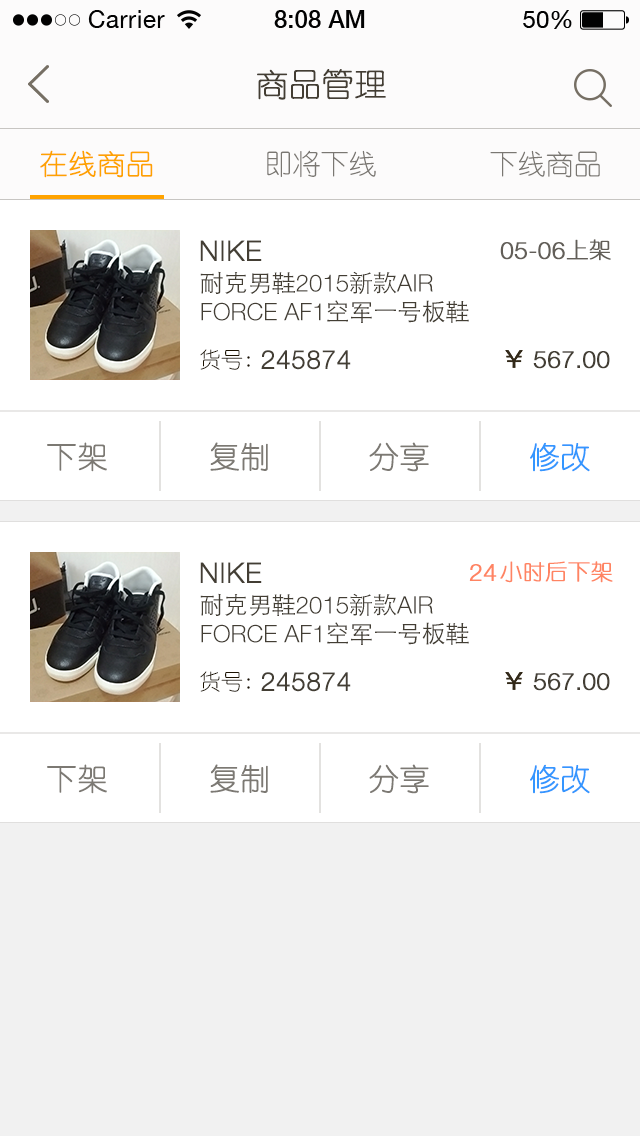
<style>
.page{position:relative;width:640px;height:1136px;background:#ffffff}
.page>*{position:absolute;margin:0}
.t1{font:32px "YouYuan";color:#433d33;text-transform:uppercase;font-weight:bold}
.t2{font:28px "YouYuan";color:#fea200;text-transform:uppercase;font-weight:bold}
.t3{font:28px "YouYuan";color:#7a7772;text-transform:uppercase}
.t4{font:28px "HelveticaNeueLTPro-Lt";color:#433e34;text-transform:uppercase;font-weight:bold}
.t5{font:24px "HelveticaNeueLTPro-Lt";color:#625e58;text-transform:uppercase;font-weight:bold}
.t6{font:22px "YouYuan";color:#625e58;text-transform:uppercase;font-weight:bold}
.t7{font:24px "HelveticaNeueLTPro-Lt";color:#433e34;text-transform:uppercase}
.t8{font:24px "STHeitiSC-Light";color:#433e34;text-transform:uppercase}
.t9{font:22px "YouYuan";color:#1b1100;text-transform:uppercase}
.t10{font:26px "HelveticaNeueLTPro-Lt";color:#433e34;text-transform:uppercase;font-weight:bold}
.t11{font:24px "HelveticaNeueLTPro-Lt";color:#433e34;text-transform:uppercase;font-weight:bold}
.t12{font:30px "YouYuan";color:#7c7973;text-transform:uppercase;font-weight:bold}
.t13{font:30px "YouYuan";color:#3496ff;text-transform:uppercase;font-weight:bold}
.t14{font:24px "HelveticaNeueLTPro-Lt";color:#ff8462;text-transform:uppercase;font-weight:bold}
.t15{font:22px "YouYuan";color:#ff8462;text-transform:uppercase;font-weight:bold}
</style>
<div class="page">
<p class="t1" style="left:257px;top:69px;width:129px;height:31px">商品管理</p>
<p class="t2" style="left:40px;top:150px;width:113px;height:28px">在线商品</p>
<p class="t3" style="left:267px;top:150px;width:109px;height:28px">即将下线</p>
<p class="t3" style="left:490px;top:150px;width:110px;height:28px">下线商品</p>
<p class="t4" style="left:200px;top:240px;width:62px;height:21px">NIKE</p>
<p class="t5" style="left:500px;top:242px;width:65px;height:18px">05-06</p>
<p class="t6" style="left:566px;top:239px;width:45px;height:22px">上架</p>
<p class="t7" style="left:200px;top:271px;width:269px;height:52px"><span class="t8">耐克男鞋</span>2015<span class="t8">新款</span>air force AF1<span class="t8">空军一号板鞋</span></p>
<p class="t9" style="left:200px;top:349px;width:50px;height:21px">货号:</p>
<p class="t10" style="left:261px;top:350px;width:90px;height:20px">245874</p>
<p class="t11" style="left:533px;top:351px;width:77px;height:18px">567.00</p>
<p class="t12" style="left:47px;top:442px;width:60px;height:30px">下架</p>
<p class="t12" style="left:210px;top:442px;width:58px;height:29px">复制</p>
<p class="t12" style="left:369px;top:442px;width:60px;height:30px">分享</p>
<p class="t13" style="left:530px;top:442px;width:60px;height:30px">修改</p>
<p class="t4" style="left:200px;top:562px;width:62px;height:21px">NIKE</p>
<p class="t14" style="left:469px;top:564px;width:28px;height:17px">24</p>
<p class="t15" style="left:500px;top:561px;width:113px;height:22px">小时后下架</p>
<p class="t7" style="left:200px;top:593px;width:269px;height:52px"><span class="t8">耐克男鞋</span>2015<span class="t8">新款</span>air force AF1<span class="t8">空军一号板鞋</span></p>
<p class="t9" style="left:200px;top:671px;width:50px;height:21px">货号:</p>
<p class="t10" style="left:261px;top:672px;width:90px;height:20px">245874</p>
<p class="t11" style="left:533px;top:673px;width:77px;height:18px">567.00</p>
<p class="t12" style="left:47px;top:764px;width:60px;height:30px">下架</p>
<p class="t12" style="left:210px;top:764px;width:58px;height:29px">复制</p>
<p class="t12" style="left:369px;top:764px;width:60px;height:30px">分享</p>
<p class="t13" style="left:530px;top:764px;width:60px;height:30px">修改</p>
</div>
